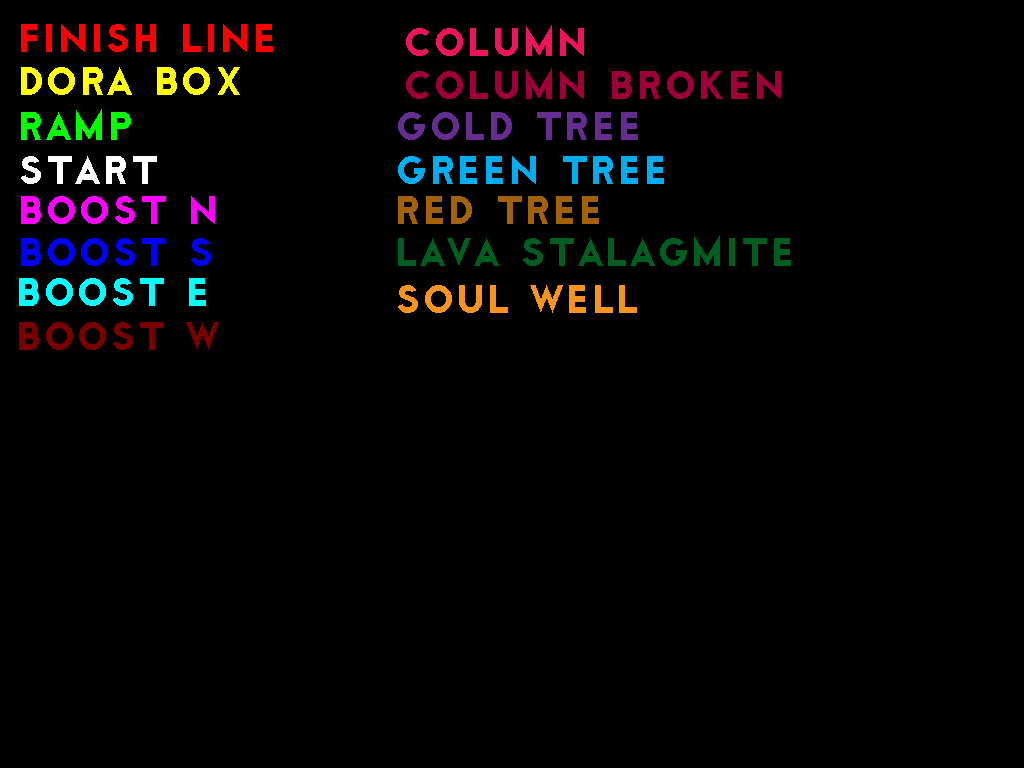
<style>
.page{position:relative;width:1024px;height:768px;background:#000000}
.page>*{position:absolute;margin:0}
.t1{font:48px "Cityof";color:#ff0000}
.t2{font:48px "Cityof";color:#ed145a}
.t3{font:48px "Cityof";color:#ffff00}
.t4{font:48px "Cityof";color:#9d0039}
.t5{font:48px "Cityof";color:#00ff00}
.t6{font:48px "Cityof";color:#662d91}
.t7{font:48px "Cityof";color:#ffffff}
.t8{font:48px "Cityof";color:#00adef}
.t9{font:48px "Cityof";color:#ff00ff}
.t10{font:48px "Cityof";color:#a36109}
.t11{font:48px "Cityof";color:#0000ff}
.t12{font:48px "Cityof";color:#005e20}
.t13{font:48px "Cityof";color:#00ffff}
.t14{font:48px "Cityof";color:#f7941d}
.t15{font:48px "Cityof";color:#790000}
</style>
<div class="page">
<p class="t1" style="left:21px;top:24px;width:252px;height:28px">finish line</p>
<p class="t2" style="left:406px;top:25px;width:178px;height:31px">column</p>
<p class="t3" style="left:21px;top:67px;width:219px;height:28px">dora box</p>
<p class="t4" style="left:406px;top:68px;width:375px;height:31px">column broken</p>
<p class="t5" style="left:21px;top:109px;width:110px;height:31px">ramp</p>
<p class="t6" style="left:398px;top:112px;width:240px;height:28px">gold tree</p>
<p class="t7" style="left:21px;top:156px;width:136px;height:28px">start</p>
<p class="t8" style="left:398px;top:156px;width:266px;height:28px">green tree</p>
<p class="t9" style="left:21px;top:196px;width:194px;height:28px">boost n</p>
<p class="t10" style="left:398px;top:196px;width:201px;height:28px">red tree</p>
<p class="t11" style="left:21px;top:238px;width:190px;height:28px">boost s</p>
<p class="t12" style="left:398px;top:235px;width:393px;height:31px">lava stalagmite</p>
<p class="t13" style="left:19px;top:278px;width:187px;height:28px">boost e</p>
<p class="t14" style="left:398px;top:285px;width:239px;height:28px">soul well</p>
<p class="t15" style="left:19px;top:322px;width:200px;height:28px">boost w</p>
</div>
